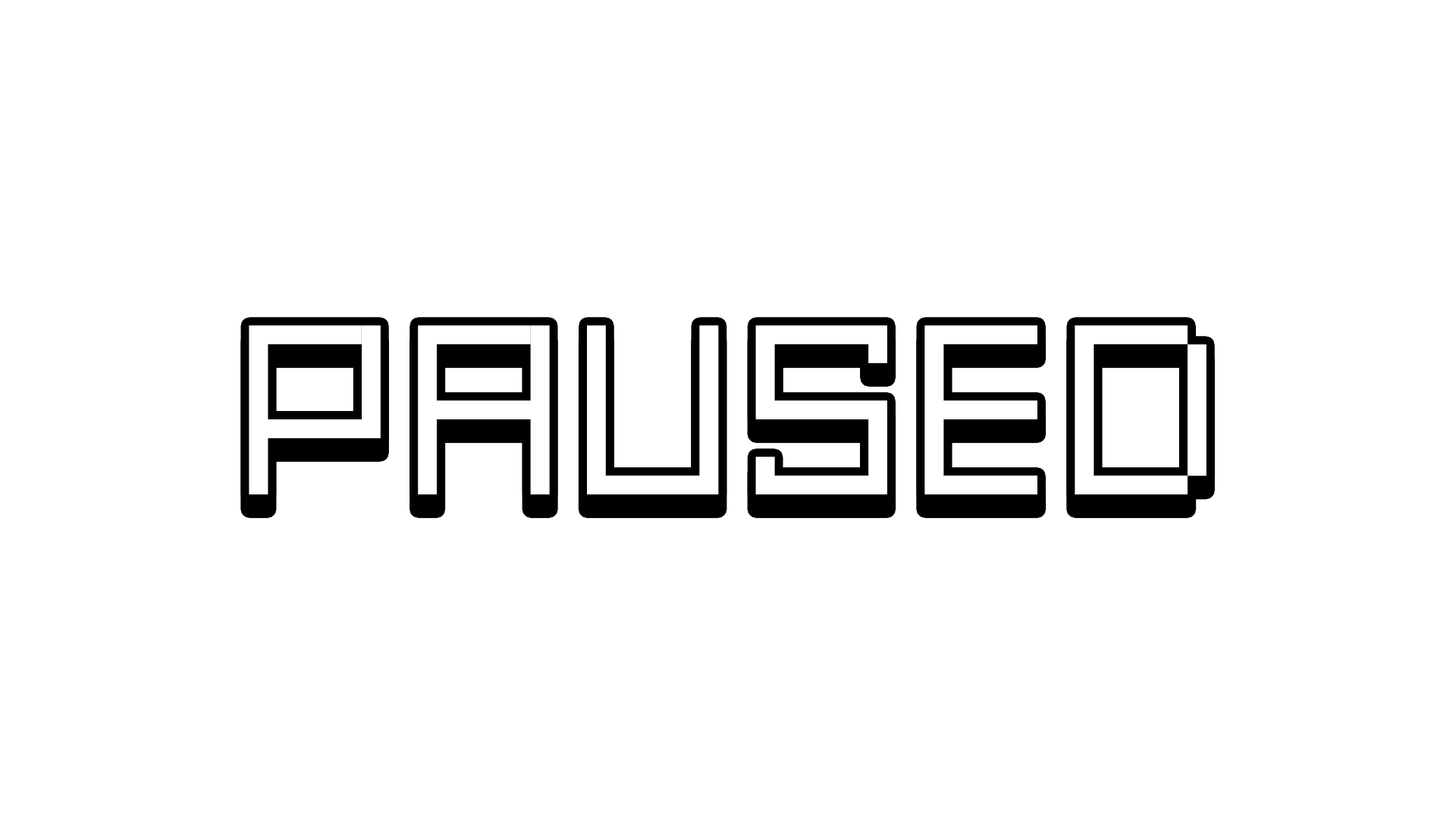
<style>
.page{position:relative;width:1456px;height:819px;background:#ffffff}
.page>*{position:absolute;margin:0}
.t1{font:150.1px "GrixelAcme9RegularXtnd";color:#ffffff}
</style>
<div class="page">
<p class="t1" style="left:249px;top:325px;width:957px;height:169px">PAUSED</p>
</div>
